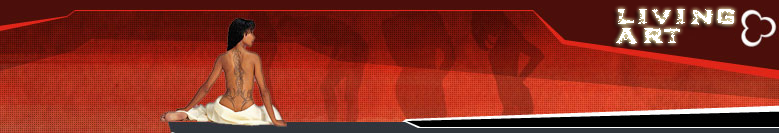
<style>
.page{position:relative;width:779px;height:133px}
.page>*{position:absolute;margin:0}
.t1{font:24px "TurbulenceRIPIkarus";letter-spacing:0.14em;color:#ffffff}
</style>
<div class="page">
<p class="t1" style="left:616px;top:9px;width:119px;height:35px">Living ARt</p>
</div>
